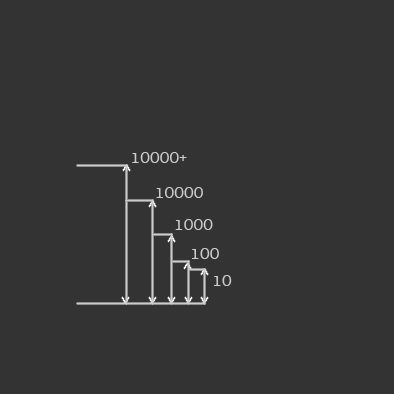
<style>
.page{position:relative;width:394px;height:394px;background:#333333}
.page>*{position:absolute;margin:0}
.t1{font:15.3px "AmericanTypewriter";color:#cccccc}
</style>
<div class="page">
<p class="t1" style="left:132px;top:152px;width:55px;height:11px">10000+</p>
<p class="t1" style="left:156px;top:187px;width:47px;height:11px">10000</p>
<p class="t1" style="left:175px;top:219px;width:38px;height:11px">1000</p>
<p class="t1" style="left:192px;top:248px;width:27px;height:11px">100</p>
<p class="t1" style="left:214px;top:275px;width:18px;height:11px">10</p>
</div>
